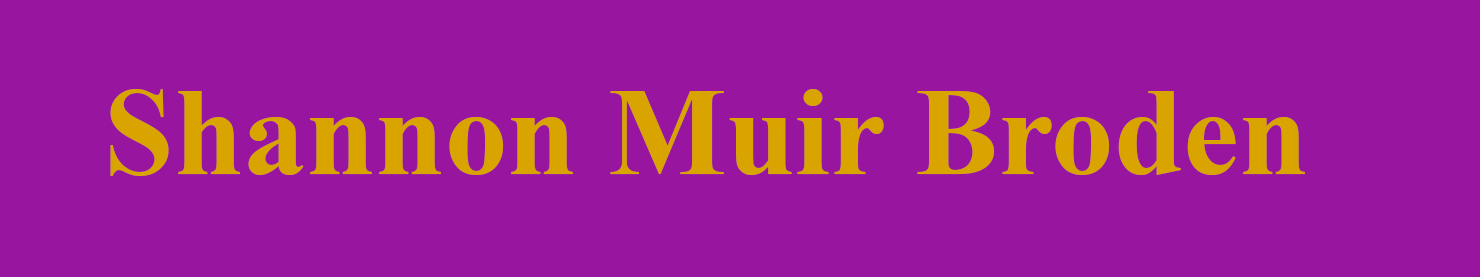
<style>
.page{position:relative;width:1480px;height:277px;background:#97159f}
.page>*{position:absolute;margin:0}
.t1{font:125px "TimesNewRomanPS-BoldMT";color:#d9a400}
</style>
<div class="page">
<p class="t1" style="left:110px;top:89px;width:1195px;height:87px">Shannon Muir Broden</p>
</div>
